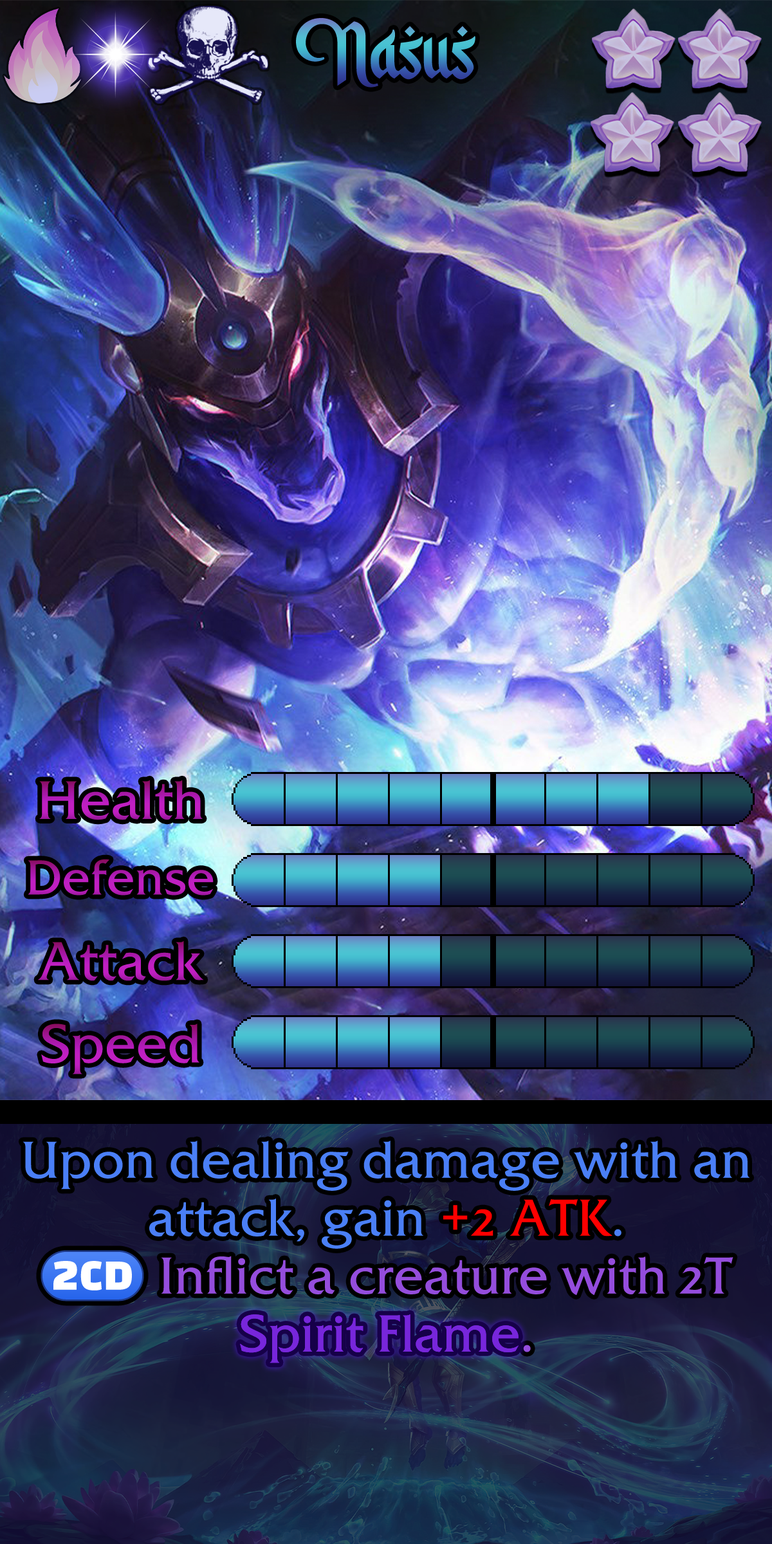
<style>
.page{position:relative;width:772px;height:1544px}
.page>*{position:absolute;margin:0}
.t1{font:152.5px "SketsaRamadhan"}
.t2{font:92.7px "FrizQua-ReguOS";color:#b21bb5}
.t3{font:83.6px "FrizQua-ReguOS";color:#b41cb7}
.t4{font:92.7px "FrizQua-ReguOS";color:#b01bb4}
.t5{font:92.7px "FrizQua-ReguOS";color:#b31bb9}
.t6{font:88.8px/57.9px "FrizQua-ReguOS";color:#4a7ff6}
.t7{font:88.8px/57.9px "FrizQua-ReguOS";color:#ff0000}
.t8{font:88.8px/57.9px "stoogedings-Regular";color:#944ddc}
.t9{font:88.8px/57.9px "FrizQua-ReguOS";color:#944ddc}
.t10{font:88.8px/57.9px "FrizQua-ReguOS";color:#7726db}
</style>
<div class="page">
<p class="t1" style="left:296px;top:18px;width:180px;height:70px">Nasus</p>
<p class="t2" style="left:39px;top:780px;width:164px;height:40px">Health</p>
<p class="t3" style="left:28px;top:859px;width:186px;height:37px">Defense</p>
<p class="t4" style="left:38px;top:941px;width:166px;height:40px">Attack</p>
<p class="t5" style="left:41px;top:1024px;width:158px;height:51px">Speed</p>
<p class="t6" style="left:23px;top:1141px;width:727px;height:222px;text-align:center">Upon dealing damage with an attack, gain <span class="t7">+2 ATK</span>.<br><span class="t8">(2CD)</span><span class="t9"> Inflict a creature with 2T </span><span class="t10">Spirit Flame</span><span class="t9">.</span></p>
</div>
